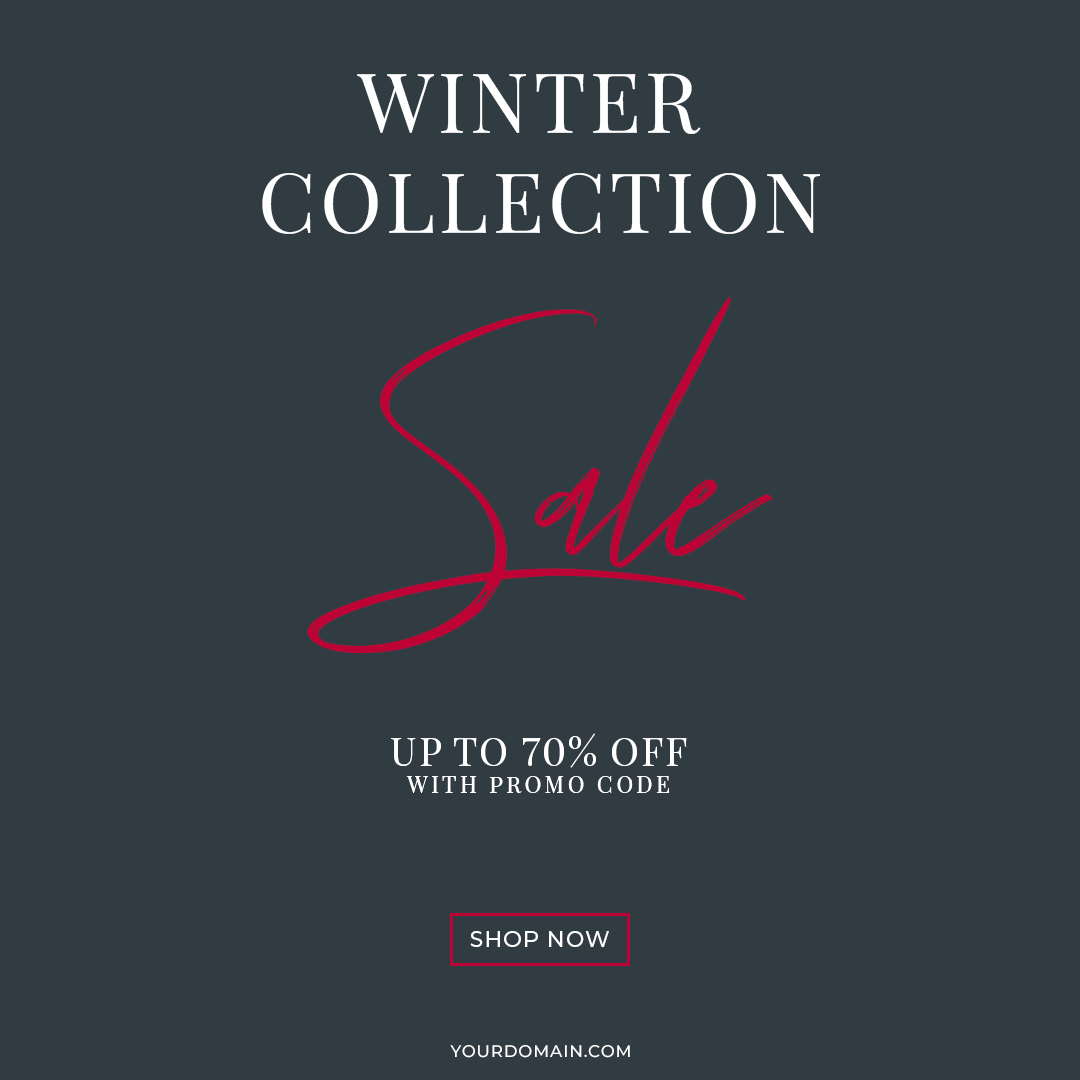
<style>
.page{position:relative;width:1080px;height:1080px;background:#313c42}
.page>*{position:absolute;margin:0}
.t1{font:83.9px "PlayfairDisplay-Regular";letter-spacing:0.05em;color:#ffffff;text-transform:uppercase}
.t2{font:247.8px "TuesdayNight-Regular";color:#bd0335}
.t3{font:39px "PlayfairDisplay-Regular";letter-spacing:0.05em;color:#ffffff;text-transform:uppercase}
.t4{font:22.8px "PlayfairDisplay-Regular";letter-spacing:0.15em;color:#ffffff;text-transform:uppercase}
.t5{font:22px "Montserrat-Medium";letter-spacing:0.05em;color:#ffffff;text-transform:uppercase}
.t6{font:16.8px "Montserrat-Medium";letter-spacing:0.05em;color:#ffffff;text-transform:uppercase}
</style>
<div class="page">
<p class="t1" style="left:262px;top:73px;width:558px;height:161px;text-align:center">Winter <br>Collection</p>
<p class="t2" style="left:307px;top:297px;width:465px;height:357px">Sale</p>
<p class="t3" style="left:391px;top:733px;width:296px;height:35px">Up To 70% Off</p>
<p class="t4" style="left:406px;top:776px;width:263px;height:17px">With Promo Code</p>
<p class="t5" style="left:470px;top:931px;width:139px;height:16px">Shop Now</p>
<p class="t6" style="left:450px;top:1045px;width:180px;height:13px">Yourdomain.com</p>
</div>
